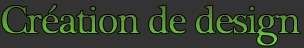
<style>
.page{position:relative;width:304px;height:48px;background:#333333}
.page>*{position:absolute;margin:0}
.t1{font:40px "PlantagenetCherokee";letter-spacing:-0.07em;font-weight:bold}
</style>
<div class="page">
<p class="t1" style="left:1px;top:3px;width:300px;height:44px">Création de design</p>
</div>
